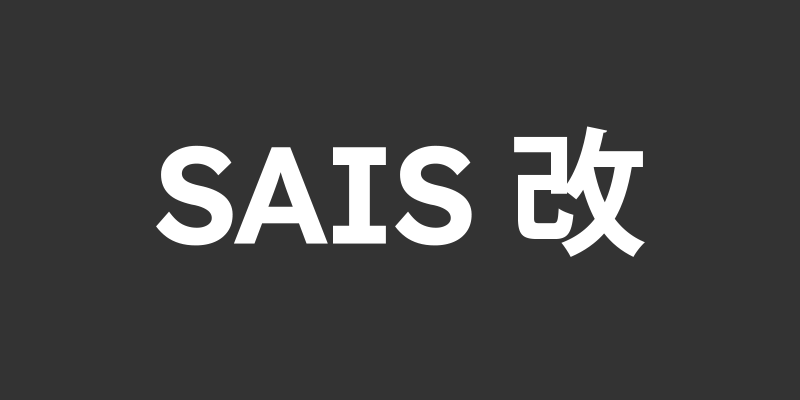
<style>
.page{position:relative;width:800px;height:400px;background:#333333}
.page>*{position:absolute;margin:0}
.t1{font:137.5px "LexendDeca-SemiBold";letter-spacing:-0.04em;color:#ffffff}
.t2{font:137.5px "KozGoPr6N-Bold";letter-spacing:-0.04em;color:#ffffff}
</style>
<div class="page">
<p class="t1" style="left:156px;top:126px;width:489px;height:131px">SAIS <span class="t2">改</span></p>
</div>
